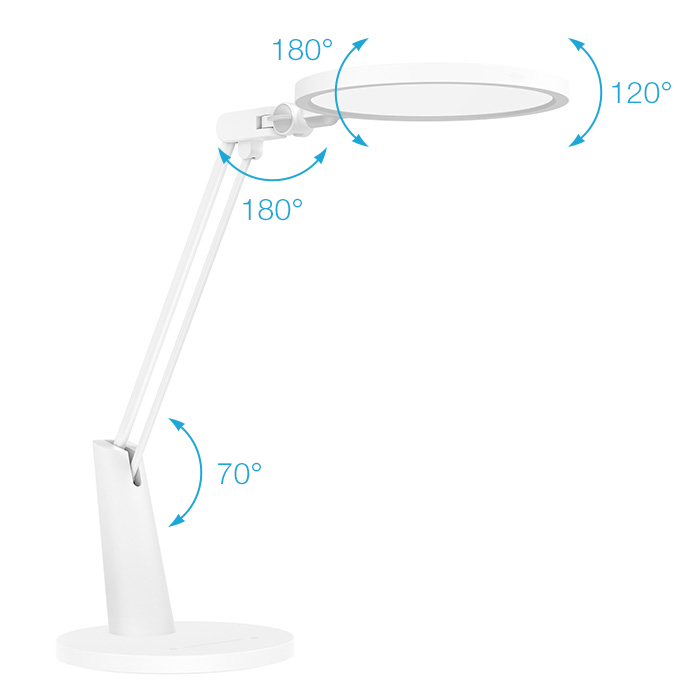
<style>
.page{position:relative;width:700px;height:700px;background:#ffffff}
.page>*{position:absolute;margin:0}
.t1{font:30px "HelveticaNeueCyr-Light";color:#1ca7d6}
</style>
<div class="page">
<p class="t1" style="left:273px;top:38px;width:59px;height:23px">180°</p>
<p class="t1" style="left:612px;top:81px;width:59px;height:23px">120°</p>
<p class="t1" style="left:243px;top:198px;width:59px;height:23px">180°</p>
<p class="t1" style="left:218px;top:462px;width:43px;height:23px">70°</p>
</div>
